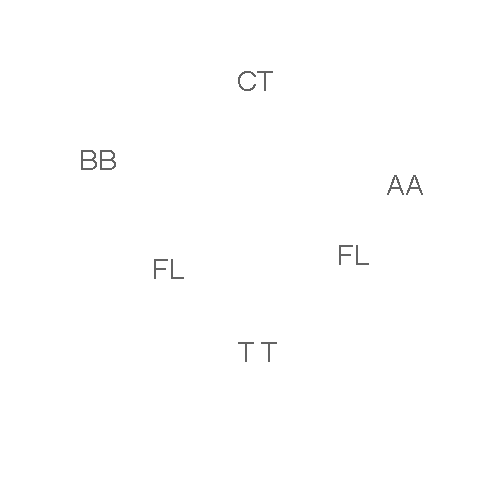
<style>
.page{position:relative;width:500px;height:500px;background:#ffffff}
.page>*{position:absolute;margin:0}
.t1{font:28.3px "ArialMT";color:#636363}
</style>
<div class="page">
<p class="t1" style="left:238px;top:71px;width:35px;height:20px">CT</p>
<p class="t1" style="left:81px;top:150px;width:35px;height:20px">BB</p>
<p class="t1" style="left:387px;top:175px;width:36px;height:20px">AA</p>
<p class="t1" style="left:339px;top:245px;width:30px;height:20px">FL</p>
<p class="t1" style="left:154px;top:259px;width:30px;height:20px">FL</p>
<p class="t1" style="left:238px;top:342px;width:39px;height:20px">T T</p>
</div>
